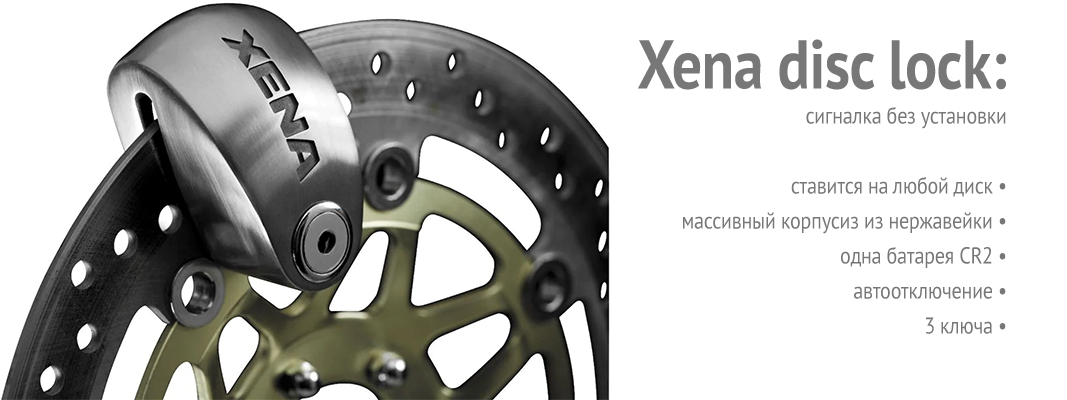
<style>
.page{position:relative;width:1067px;height:400px;background:#ffffff}
.page>*{position:absolute;margin:0}
.t1{font:23px/35px "PTSans-Regular";letter-spacing:-0.01em;color:#777777;scale:0.87 1}
.t2{font:69px/35px "PTSans-Bold";letter-spacing:-0.01em;color:#777777;scale:0.87 1}
</style>
<div class="page">
<p class="t1" style="left:637px;top:39px;width:369px;height:295px;text-align:right"><span class="t2">Xena disc lock:<br></span>сигналка без установки<br><br>ставится на любой диск •<br>массивный корпусиз из нержавейки •<br>одна батарея CR2 •<br>автоотключение •<br>3 ключа •</p>
</div>
